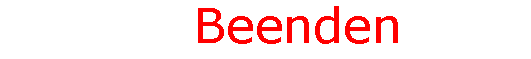
<style>
.page{position:relative;width:531px;height:59px;background:#ffffff}
.page>*{position:absolute;margin:0}
.t1{font:48px "Verdana";color:#ff0000}
</style>
<div class="page">
<p class="t1" style="left:198px;top:6px;width:200px;height:38px">Beenden</p>
</div>
